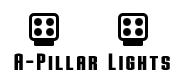
<style>
.page{position:relative;width:180px;height:78px;background:#ffffff}
.page>*{position:absolute;margin:0}
.t1{font:24px "Stark";letter-spacing:0.05em;color:#000000}
</style>
<div class="page">
<p class="t1" style="left:14px;top:53px;width:156px;height:17px">A-Pillar Lights</p>
</div>
